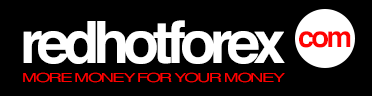
<style>
.page{position:relative;width:372px;height:96px;background:#000000}
.page>*{position:absolute;margin:0}
.t1{font:58.3px "Helvetica-Bold";letter-spacing:-0.1em;color:#ffffff}
.t2{font:29.2px "Helvetica-Bold";letter-spacing:-0.1em;color:#ff0202}
.t3{font:12.7px "Helvetica";letter-spacing:-0.1em;color:#ff0000;scale:1.48 1}
</style>
<div class="page">
<p class="t1" style="left:23px;top:20px;width:262px;height:44px">redhotforex</p>
<p class="t2" style="left:299px;top:31px;width:52px;height:17px">com</p>
<p class="t3" style="left:23px;top:72px;width:262px;height:11px">MORE MONEY FOR YOUR MONEY</p>
</div>
